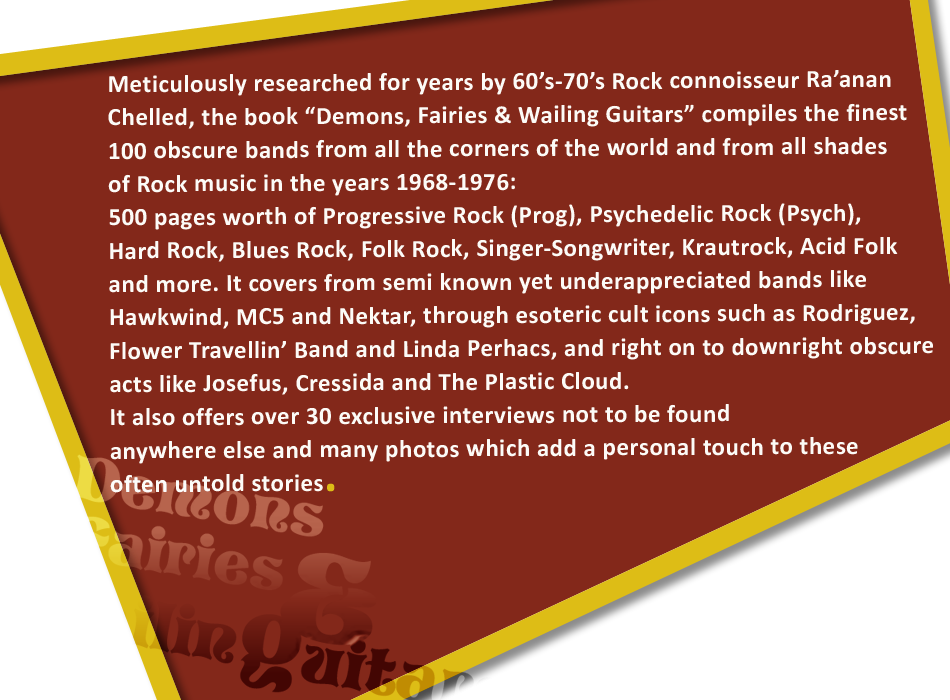
<style>
.page{position:relative;width:950px;height:700px;background:#83281a}
.page>*{position:absolute;margin:0}
.t1{font:25px/33.3px "Calibri-Bold";letter-spacing:0.02em;color:#fcfbf7}
.t2{font:50px/33.3px "Calibri-Bold";letter-spacing:0.02em;color:#ddbd16}
</style>
<div class="page">
<p class="t1" style="left:108px;top:70px;width:825px;height:423px">Meticulously researched for years by 60’s-70’s Rock connoisseur Ra’anan <br>Chelled, the book “Demons, Fairies &amp; Wailing Guitars” compiles the finest <br>100 obscure bands from all the corners of the world and from all shades <br>of Rock music in the years 1968-1976: <br>500 pages worth of Progressive Rock (Prog), Psychedelic Rock (Psych), <br>Hard Rock, Blues Rock, Folk Rock, Singer-Songwriter, Krautrock, Acid Folk <br>and more. It covers from semi known yet underappreciated bands like <br>Hawkwind, MC5 and Nektar, through esoteric cult icons such as Rodriguez, <br>Flower Travellin’ Band and Linda Perhacs, and right on to downright obscure <br>acts like Josefus, Cressida and The Plastic Cloud. <br>It also offers over 30 exclusive interviews not to be found <br>anywhere else and many photos which add a personal touch to these <br>often untold stories<span class="t2">.</span></p>
</div>
